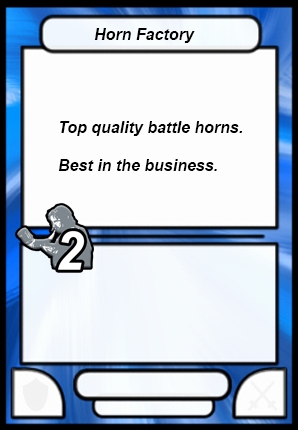
<style>
.page{position:relative;width:298px;height:430px;background:#fdfdfd}
.page>*{position:absolute;margin:0}
.t1{font:16px "Arial-BoldItalicMT";color:#000000}
</style>
<div class="page">
<p class="t1" style="left:94px;top:28px;width:101px;height:15px">Horn Factory</p>
<p class="t1" style="left:58px;top:121px;width:184px;height:50px">Top quality battle horns.<br><br>Best in the business.</p>
</div>
